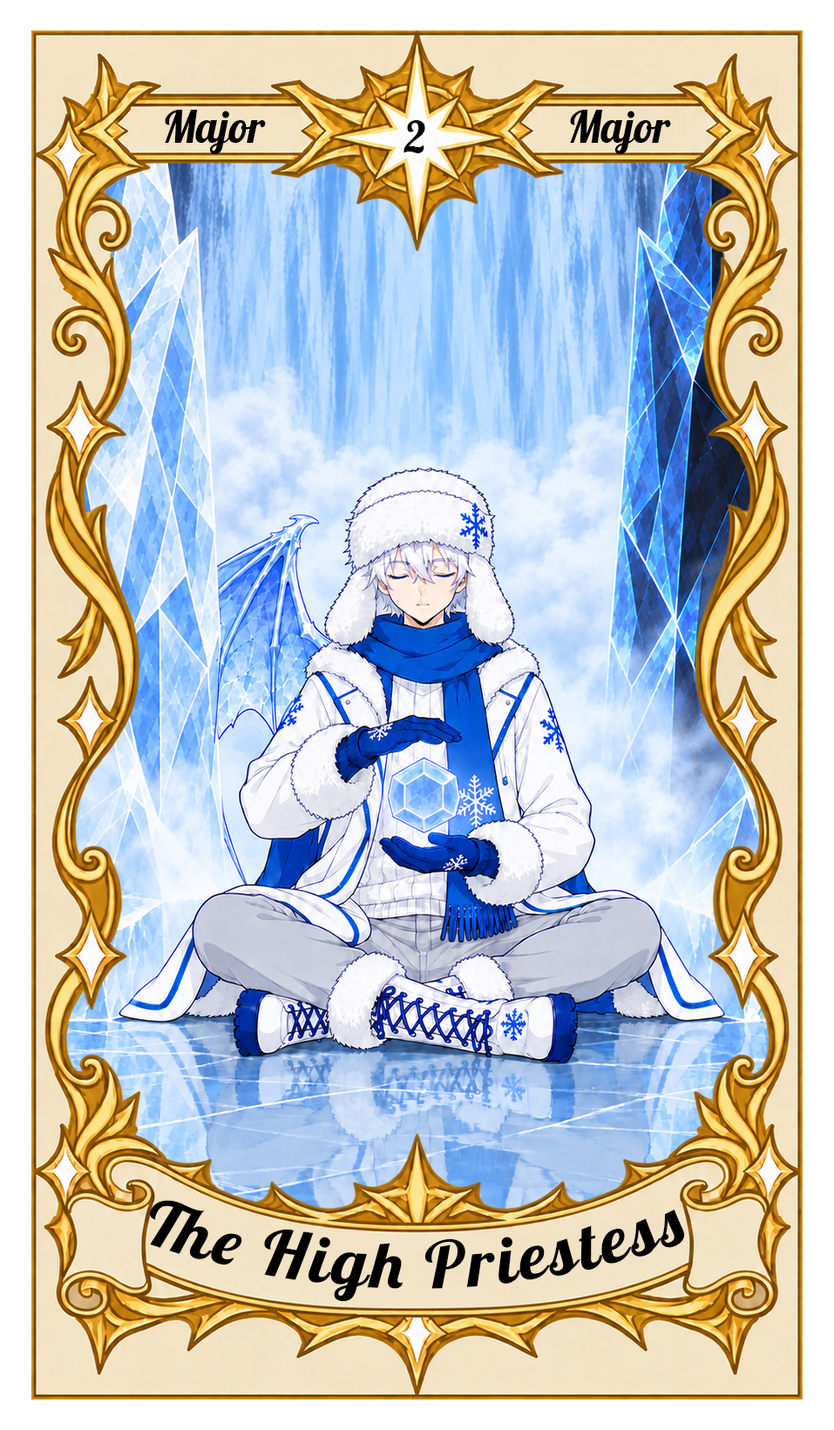
<style>
.page{position:relative;width:834px;height:1430px}
.page>*{position:absolute;margin:0}
.t1{font:43.6px "Lobster-Regular";color:#000000}
.t2{font:65.3px "Lobster-Regular";letter-spacing:0.05em;color:#000000}
</style>
<div class="page">
<p class="t1" style="left:165px;top:110px;width:101px;height:44px">Major</p>
<p class="t1" style="left:570px;top:110px;width:101px;height:44px">Major</p>
<p class="t1" style="left:403px;top:120px;width:22px;height:33px">2</p>
<p class="t2" style="left:150px;top:1200px;width:535px;height:102px">The High Priestess</p>
</div>
